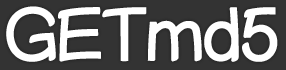
<style>
.page{position:relative;width:286px;height:70px;background:#333333}
.page>*{position:absolute;margin:0}
.t1{font:72px "YuppySC-Regular";letter-spacing:-0.04em;color:#ffffff;font-weight:bold}
</style>
<div class="page">
<p class="t1" style="left:6px;top:6px;width:272px;height:56px">GETmd5</p>
</div>
